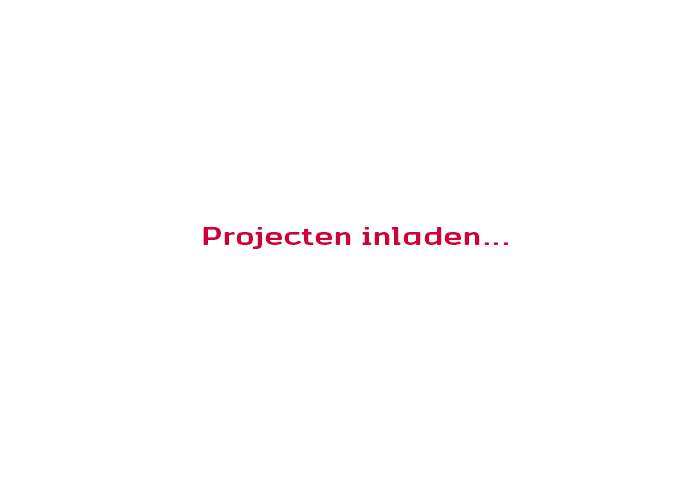
<style>
.page{position:relative;width:700px;height:500px;background:#ffffff}
.page>*{position:absolute;margin:0}
.t1{font:21.9px "Antwerpen-Regular";color:#d0003a;scale:1.56 1}
</style>
<div class="page">
<p class="t1" style="left:203px;top:227px;width:305px;height:22px">Projecten inladen...</p>
</div>
